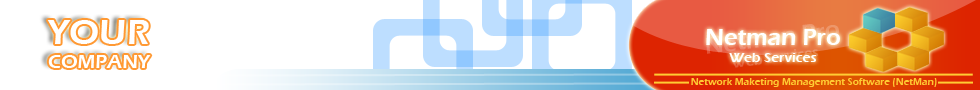
<style>
.page{position:relative;width:980px;height:90px;background:#ffffff}
.page>*{position:absolute;margin:0}
.t1{font:20px "ErasITC-Demi";color:#ffffff}
.t2{font:36px "ErasITC-Demi";color:#ffffff}
.t3{font:14px "ErasITC-Demi"}
.t4{font:24px "ErasITC-Demi"}
.t5{font:14px "ErasITC-Demi";color:#ffffff}
.t6{font:24px "ErasITC-Demi";color:#ffffff}
.t7{font:10px "ErasITC-Demi";color:#ffcc33}
</style>
<div class="page">
<p class="t1" style="left:47px;top:20px;width:104px;height:48px;text-align:center"><span class="t2">YOUR<br></span>COMPANY</p>
<p class="t3" style="left:705px;top:24px;width:134px;height:44px;text-align:center;rotate:-8deg"><span class="t4">Netman Pro<br></span>Web Services</p>
<p class="t5" style="left:706px;top:29px;width:134px;height:33px;text-align:center"><span class="t6">Netman Pro<br></span>Web Services</p>
<p class="t7" style="left:691px;top:78px;width:246px;height:9px">Network Maketing Management Software (NetMan)</p>
</div>
